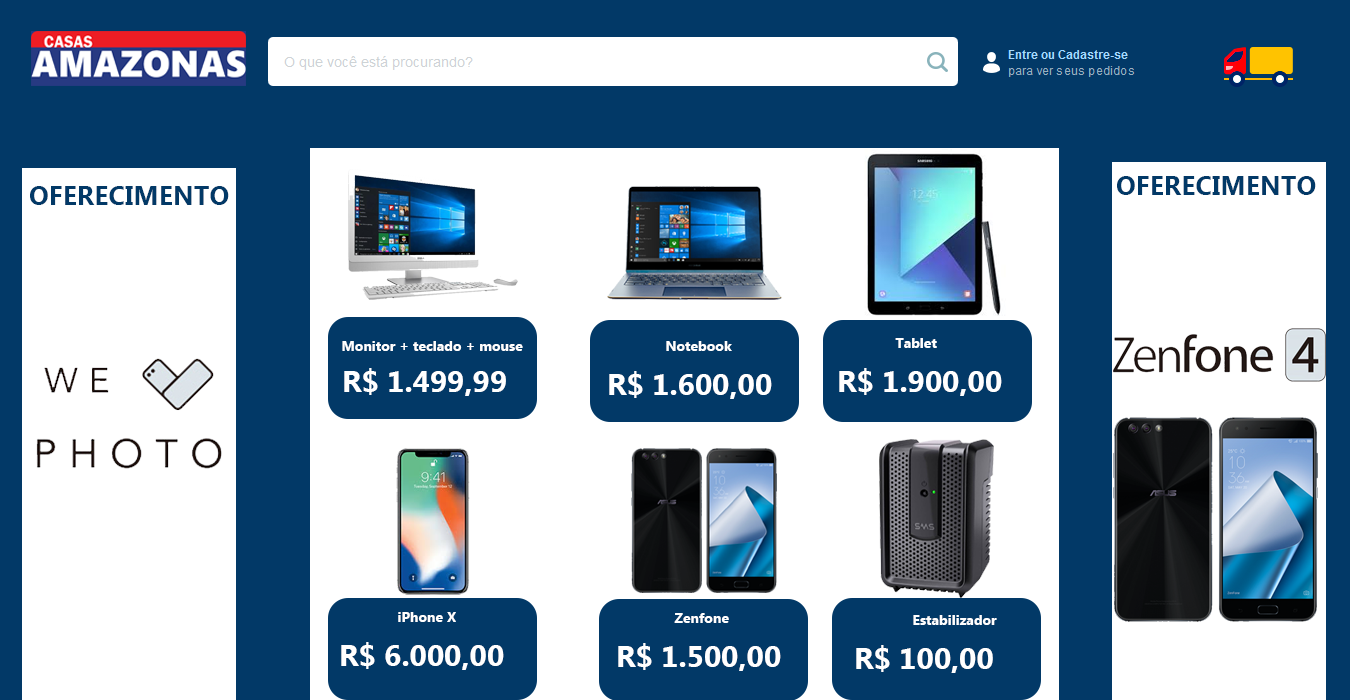
<style>
.page{position:relative;width:1350px;height:700px;background:#ffffff}
.page>*{position:absolute;margin:0}
.t1{font:27.1px "MicrosoftNewTaiLue-Bold";color:#023967}
.t2{font:14px "MicrosoftNewTaiLue-Bold";color:#ffffff}
.t3{font:30px "MicrosoftNewTaiLue-Bold";color:#ffffff}
</style>
<div class="page">
<p class="t1" style="left:1117px;top:176px;width:199px;height:19px">OFERECIMENTO</p>
<p class="t1" style="left:30px;top:186px;width:199px;height:19px">OFERECIMENTO</p>
<p class="t2" style="left:342px;top:341px;width:181px;height:10px">Monitor + teclado + mouse</p>
<p class="t2" style="left:666px;top:341px;width:66px;height:10px">Notebook</p>
<p class="t2" style="left:895px;top:338px;width:42px;height:10px">Tablet</p>
<p class="t3" style="left:344px;top:368px;width:162px;height:28px">R$ 1.499,99</p>
<p class="t3" style="left:609px;top:371px;width:163px;height:28px">R$ 1.600,00</p>
<p class="t3" style="left:839px;top:368px;width:163px;height:28px">R$ 1.900,00</p>
<p class="t2" style="left:398px;top:612px;width:58px;height:10px">iPhone X</p>
<p class="t2" style="left:674px;top:613px;width:55px;height:10px">Zenfone</p>
<p class="t2" style="left:913px;top:615px;width:84px;height:10px">Estabilizador</p>
<p class="t3" style="left:341px;top:642px;width:163px;height:28px">R$ 6.000,00</p>
<p class="t3" style="left:618px;top:643px;width:163px;height:28px">R$ 1.500,00</p>
<p class="t3" style="left:856px;top:645px;width:137px;height:28px">R$ 100,00</p>
</div>
